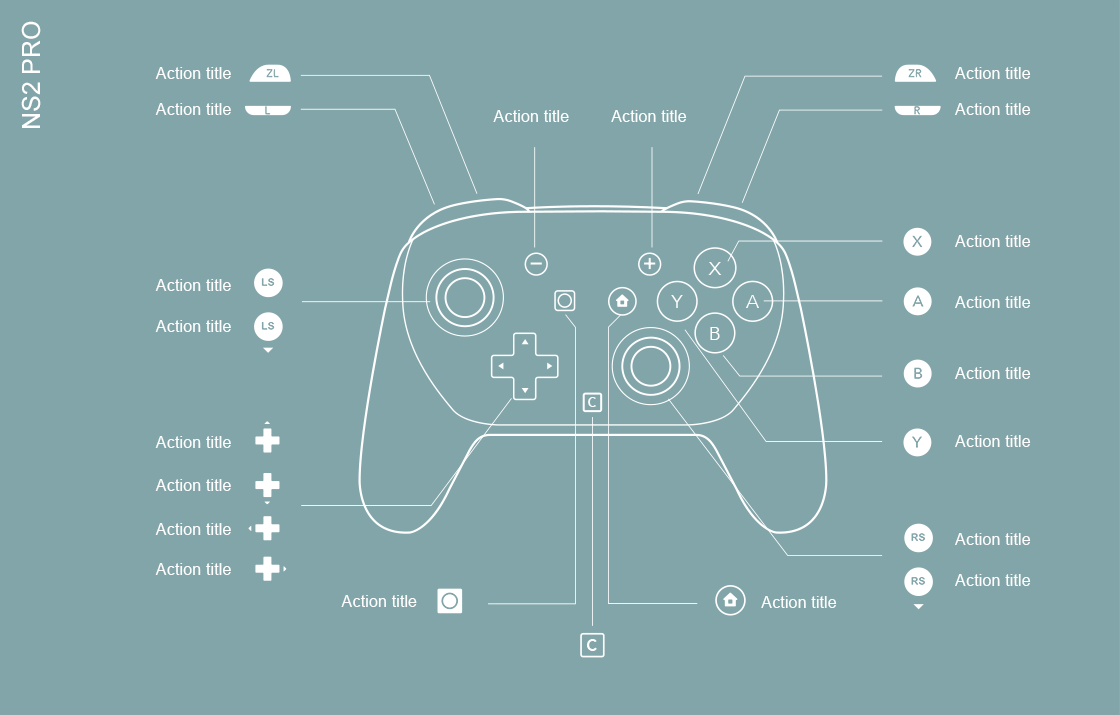
<style>
.page{position:relative;width:1120px;height:715px;background:#82a5a9}
.page>*{position:absolute;margin:0}
.t1{font:25px "ArialMT";color:#ffffff}
.t2{font:16.4px "ArialMT";color:#ffffff}
.t3{font:19.1px "Avenir-Light";color:#ffffff;scale:1.05 1}
.t4{font:19.1px "Avenir-Light";color:#ffffff}
.t5{font:13.4px "Avenir-Heavy";color:#ffffff;scale:0.91 1}
.t6{font:16.7px "Avenir-Heavy";color:#ffffff;scale:0.91 1}
</style>
<div class="page">
<p class="t1" style="left:21px;top:21px;width:20px;height:107px;rotate:-90deg">NS2 PRO</p>
<p class="t2" style="left:155px;top:67px;width:76px;height:12px">Action title</p>
<p class="t2" style="left:955px;top:67px;width:76px;height:12px">Action title</p>
<p class="t2" style="left:155px;top:103px;width:76px;height:12px">Action title</p>
<p class="t2" style="left:493px;top:110px;width:76px;height:12px">Action title</p>
<p class="t2" style="left:611px;top:110px;width:76px;height:12px">Action title</p>
<p class="t2" style="left:955px;top:103px;width:76px;height:12px">Action title</p>
<p class="t2" style="left:955px;top:235px;width:76px;height:12px">Action title</p>
<p class="t3" style="left:708px;top:262px;width:14px;height:13px">X</p>
<p class="t2" style="left:155px;top:279px;width:76px;height:12px">Action title</p>
<p class="t4" style="left:671px;top:295px;width:12px;height:13px">Y</p>
<p class="t4" style="left:746px;top:295px;width:13px;height:13px">A</p>
<p class="t2" style="left:955px;top:296px;width:76px;height:12px">Action title</p>
<p class="t2" style="left:155px;top:320px;width:76px;height:12px">Action title</p>
<p class="t4" style="left:710px;top:327px;width:10px;height:13px">B</p>
<p class="t2" style="left:955px;top:367px;width:76px;height:12px">Action title</p>
<p class="t5" style="left:588px;top:397px;width:8px;height:10px">C</p>
<p class="t2" style="left:155px;top:436px;width:76px;height:12px">Action title</p>
<p class="t2" style="left:955px;top:435px;width:76px;height:12px">Action title</p>
<p class="t2" style="left:155px;top:479px;width:76px;height:12px">Action title</p>
<p class="t2" style="left:155px;top:523px;width:76px;height:12px">Action title</p>
<p class="t2" style="left:955px;top:533px;width:76px;height:12px">Action title</p>
<p class="t2" style="left:155px;top:563px;width:76px;height:12px">Action title</p>
<p class="t2" style="left:955px;top:574px;width:76px;height:12px">Action title</p>
<p class="t2" style="left:341px;top:595px;width:76px;height:12px">Action title</p>
<p class="t2" style="left:761px;top:596px;width:76px;height:12px">Action title</p>
<p class="t6" style="left:587px;top:639px;width:10px;height:12px">C</p>
</div>
